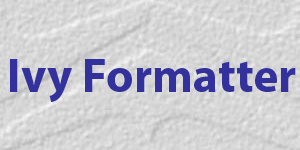
<style>
.page{position:relative;width:300px;height:150px}
.page>*{position:absolute;margin:0}
.t1{font:48px "MyriadPro-Bold";color:#33319c}
</style>
<div class="page">
<p class="t1" style="left:10px;top:59px;width:286px;height:43px">Ivy Formatter</p>
</div>
